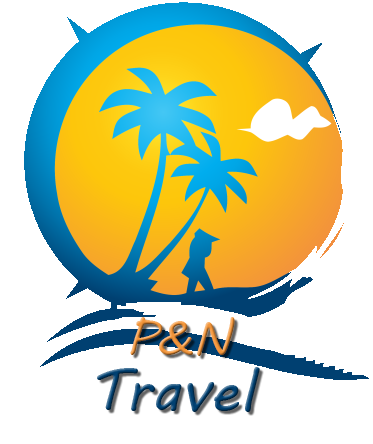
<style>
.page{position:relative;width:373px;height:444px;background:#ffffff}
.page>*{position:absolute;margin:0}
.t1{font:48px "MVBoli"}
.t2{font:60px "MVBoli"}
</style>
<div class="page">
<p class="t1" style="left:130px;top:317px;width:105px;height:39px">P&amp;N</p>
<p class="t2" style="left:97px;top:367px;width:163px;height:45px">Travel</p>
</div>
